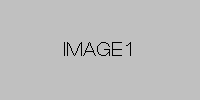
<style>
.page{position:relative;width:200px;height:100px;background:#c0c0c0}
.page>*{position:absolute;margin:0}
.t1{font:18.9px "HelveticaNeueLTStd-ThEx";letter-spacing:-0.005em;color:#000000;text-transform:uppercase;scale:0.95 1}
</style>
<div class="page">
<p class="t1" style="left:64px;top:42px;width:67px;height:14px">Image 1</p>
</div>
